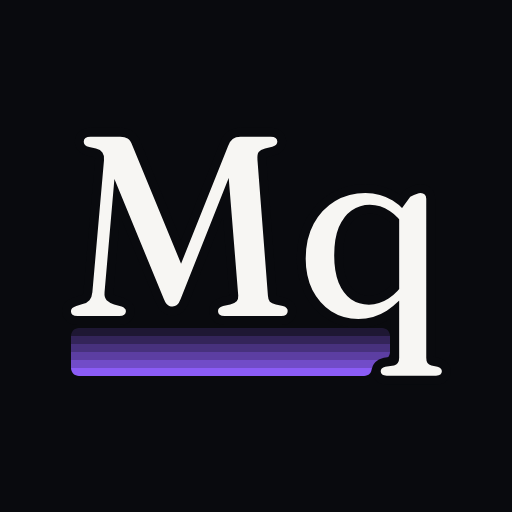
<style>
.page{position:relative;width:512px;height:512px;background:#090a0e}
.page>*{position:absolute;margin:0}
.t1{font:256px "Fraunces-Regular"}
</style>
<div class="page">
<p class="t1" style="left:61px;top:127px;width:390px;height:258px">Mq</p>
</div>
